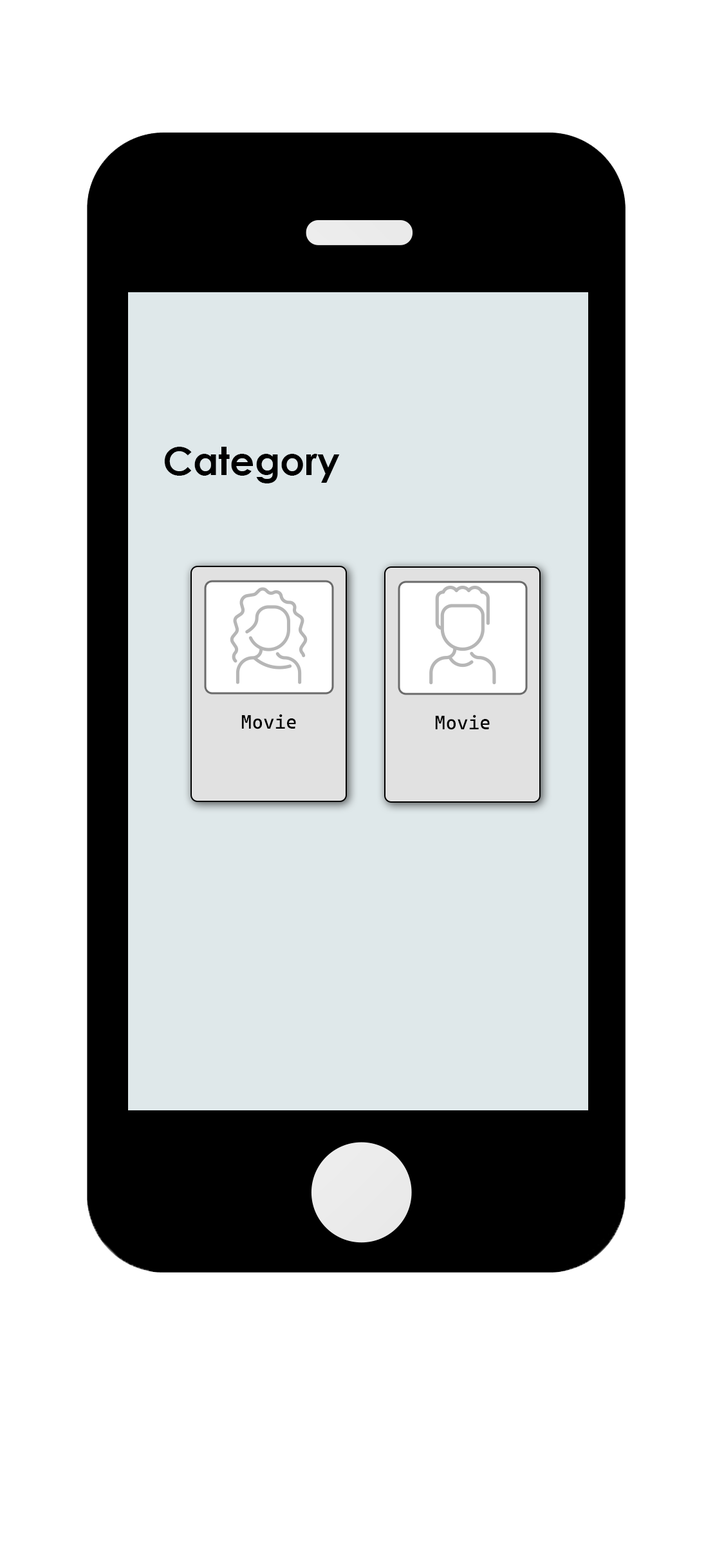
<style>
.page{position:relative;width:724px;height:1568px;background:#ffffff}
.page>*{position:absolute;margin:0}
.t1{font:38.6px "CenturyGothic-Bold";color:#000000}
.t2{font:19.3px "CascadiaCode-Roman";color:#000000}
</style>
<div class="page">
<p class="t1" style="left:164px;top:447px;width:176px;height:36px">Category</p>
<p class="t2" style="left:241px;top:714px;width:55px;height:15px">Movie</p>
<p class="t2" style="left:435px;top:714px;width:55px;height:16px">Movie</p>
</div>
